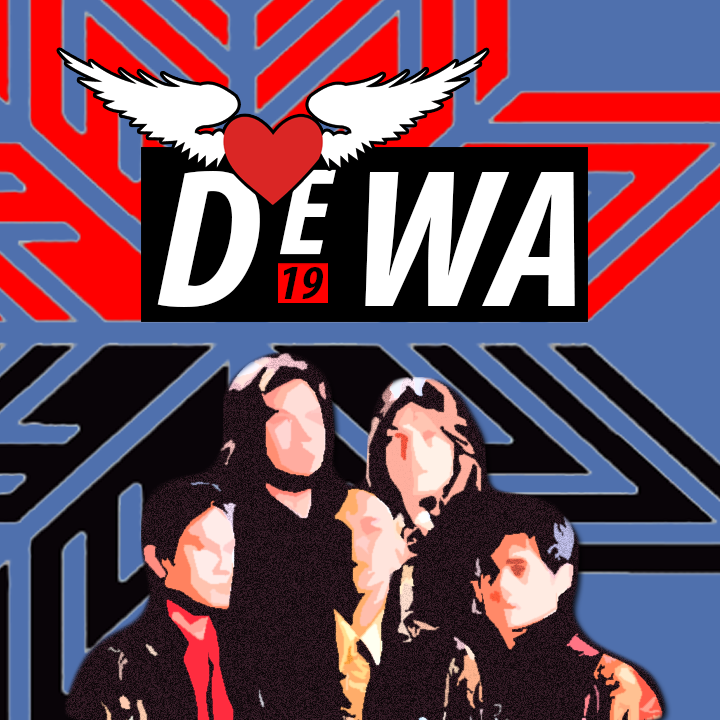
<style>
.page{position:relative;width:720px;height:720px;background:#4f70ad}
.page>*{position:absolute;margin:0}
.t1{font:198.6px "MyriadPro-BoldCondIt";color:#ffffff;scale:1.1 1}
.t2{font:124.1px "MyriadPro-BoldCondIt";color:#ffffff;scale:1.1 1}
.t3{font:48px "MyriadPro-BoldCondIt";color:#000000;scale:1.1 1}
</style>
<div class="page">
<p class="t1" style="left:157px;top:171px;width:418px;height:136px">D   WA</p>
<p class="t2" style="left:280px;top:169px;width:56px;height:86px">E</p>
<p class="t3" style="left:284px;top:267px;width:39px;height:32px">19</p>
</div>
